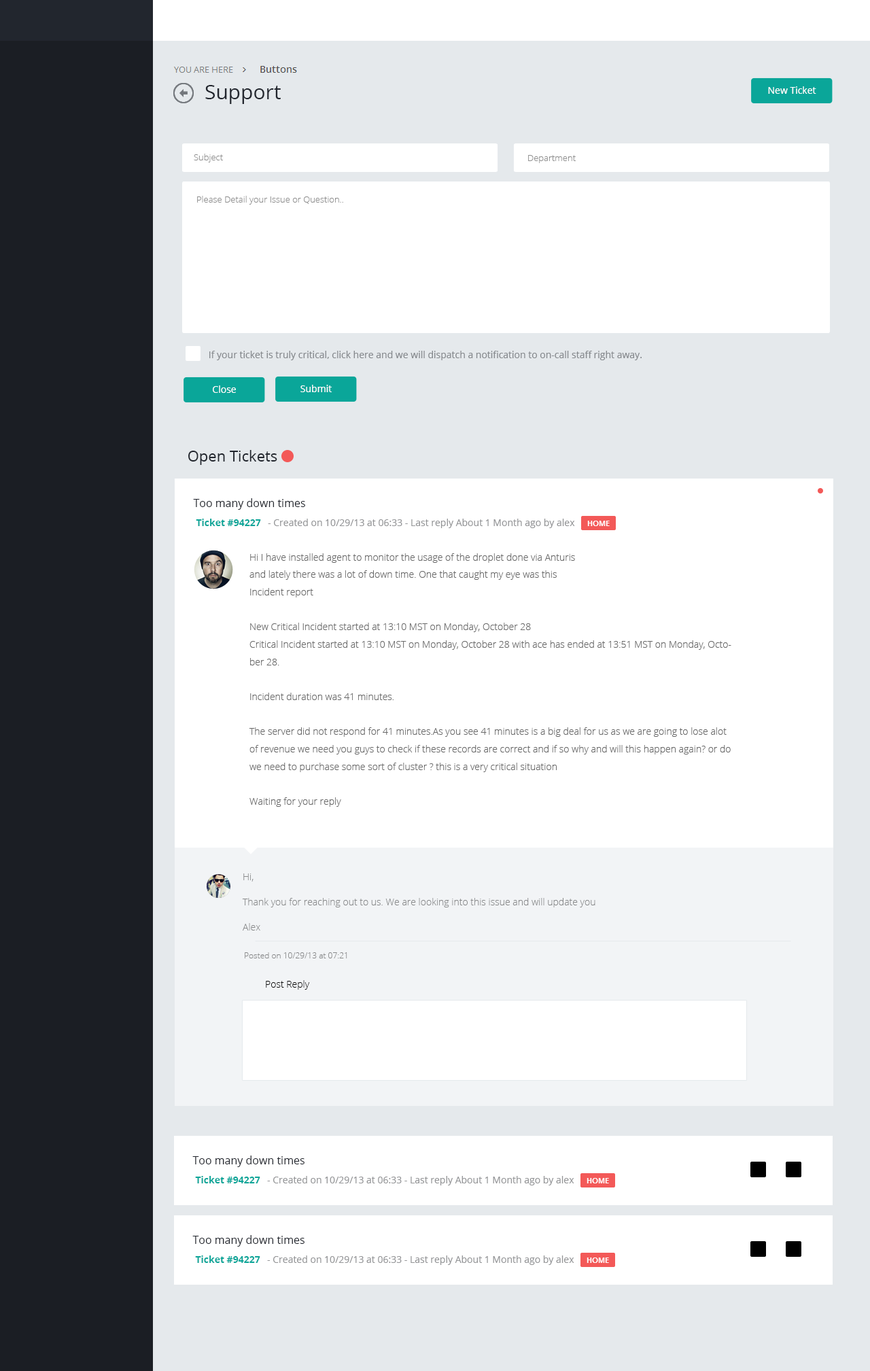
<style>
.page{position:relative;width:870px;height:1371px;background:#ffffff}
.page>*{position:absolute;margin:0}
.t1{font:20.4px "OpenSans";color:#22262e}
.t2{font:9.5px "OpenSans";color:#ffffff}
.t3{font:8.8px "OpenSans-Light";color:#8d8d8d}
.t4{font:9.5px "OpenSans";color:#868a8e}
.t5{font:15px "OpenSans";color:#22262e}
.t6{font:10.9px "OpenSans";color:#22262e}
.t7{font:9.5px "OpenSans-Bold";color:#0aa699}
.t8{font:9.5px "OpenSans";color:#959698}
.t9{font:9.5px/17.4px "OpenSans-Light";color:#696969}
.t10{font:9.5px/12.7px "OpenSans-Light";color:#88898a}
.t11{font:8.2px "OpenSans-Light";color:#88898a}
.t12{font:9.5px "OpenSans-Light";color:#000000}
</style>
<div class="page">
<p class="t1" style="left:205px;top:85px;width:76px;height:19px">Support</p>
<p class="t2" style="left:768px;top:86px;width:48px;height:8px">New Ticket</p>
<p class="t3" style="left:194px;top:154px;width:29px;height:8px">Subject</p>
<p class="t3" style="left:528px;top:155px;width:48px;height:8px">Department</p>
<p class="t3" style="left:197px;top:196px;width:146px;height:9px">Please Detail your Issue or Question..</p>
<p class="t4" style="left:209px;top:351px;width:433px;height:9px">If your ticket is truly critical, click here and we will dispatch a notification to on-call staff right away.</p>
<p class="t2" style="left:213px;top:385px;width:23px;height:8px">Close</p>
<p class="t2" style="left:300px;top:385px;width:32px;height:7px">Submit</p>
<p class="t5" style="left:188px;top:450px;width:89px;height:15px">Open Tickets</p>
<p class="t6" style="left:193px;top:498px;width:112px;height:12px">Too many down times</p>
<p class="t7" style="left:196px;top:519px;width:65px;height:7px">Ticket #94227</p>
<p class="t8" style="left:268px;top:519px;width:307px;height:9px">- Created on 10/29/13 at 06:33 - Last reply About 1 Month ago by alex</p>
<p class="t9" style="left:249px;top:553px;width:482px;height:254px">Hi I have installed agent to monitor the usage of the droplet done via Anturis <br>and lately there was a lot of down time. One that caught my eye was this <br>Incident report<br><br>New Critical Incident started at 13:10 MST on Monday, October 28 <br>Critical Incident started at 13:10 MST on Monday, October 28 with ace has ended at 13:51 MST on Monday, October 28.<br><br>Incident duration was 41 minutes.<br><br>The server did not respond for 41 minutes.As you see 41 minutes is a big deal for us as we are going to lose alot of revenue we need you guys to check if these records are correct and if so why and will this happen again? or do we need to purchase some sort of cluster ? this is a very critical situation<br><br>Waiting for your reply</p>
<p class="t10" style="left:242px;top:873px;width:353px;height:57px">Hi,<br><br>Thank you for reaching out to us. We are looking into this issue and will update you<br><br>Alex</p>
<p class="t11" style="left:245px;top:952px;width:102px;height:6px">Posted on 10/29/13 at 07:21</p>
<p class="t12" style="left:266px;top:980px;width:44px;height:10px">Post Reply</p>
<p class="t6" style="left:192px;top:1155px;width:112px;height:12px">Too many down times</p>
<p class="t7" style="left:195px;top:1176px;width:65px;height:7px">Ticket #94227</p>
<p class="t8" style="left:267px;top:1176px;width:307px;height:9px">- Created on 10/29/13 at 06:33 - Last reply About 1 Month ago by alex</p>
<p class="t6" style="left:192px;top:1235px;width:112px;height:11px">Too many down times</p>
<p class="t7" style="left:195px;top:1255px;width:65px;height:8px">Ticket #94227</p>
<p class="t8" style="left:267px;top:1255px;width:307px;height:10px">- Created on 10/29/13 at 06:33 - Last reply About 1 Month ago by alex</p>
</div>
